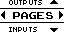
<style>
.page{position:relative;width:64px;height:32px;background:#ffffff}
.page>*{position:absolute;margin:0}
.t1{font:8px "04b03";color:#000000;scale:1.06 1}
.t2{font:14px "ArcadeClassic";color:#000000;scale:1.05 1}
</style>
<div class="page">
<p class="t1" style="left:9px;top:0px;width:33px;height:5px">OUTPUTS</p>
<p class="t2" style="left:13px;top:12px;width:40px;height:7px">PAGES</p>
<p class="t1" style="left:9px;top:27px;width:28px;height:5px">INPUTS</p>
</div>
